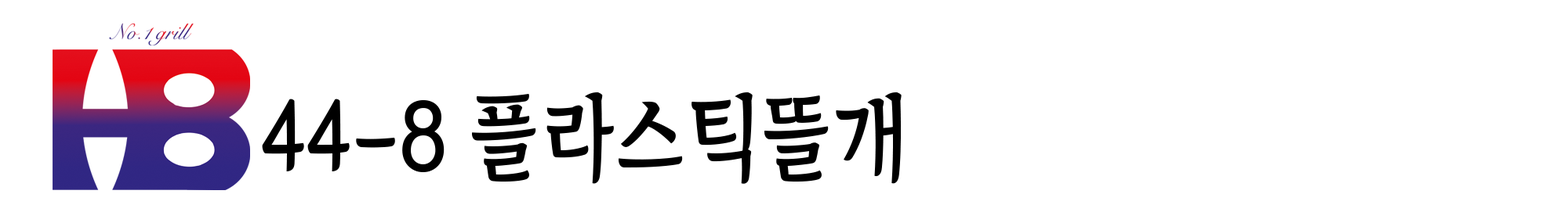
<style>
.page{position:relative;width:1568px;height:205px;background:#ffffff}
.page>*{position:absolute;margin:0}
.t1{font:93.7px "TheIndependenceHallofKorea-Regular";color:#000000;scale:0.89 1}
</style>
<div class="page">
<p class="t1" style="left:262px;top:93px;width:640px;height:91px">44-8 플라스틱뜰개</p>
</div>
